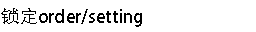
<style>
.page{position:relative;width:256px;height:32px;background:#ffffff}
.page>*{position:absolute;margin:0}
.t1{font:18px "AdobeHeitiStd-Regular";color:#000000}
</style>
<div class="page">
<p class="t1" style="left:1px;top:8px;width:141px;height:19px">锁定order/setting</p>
</div>
